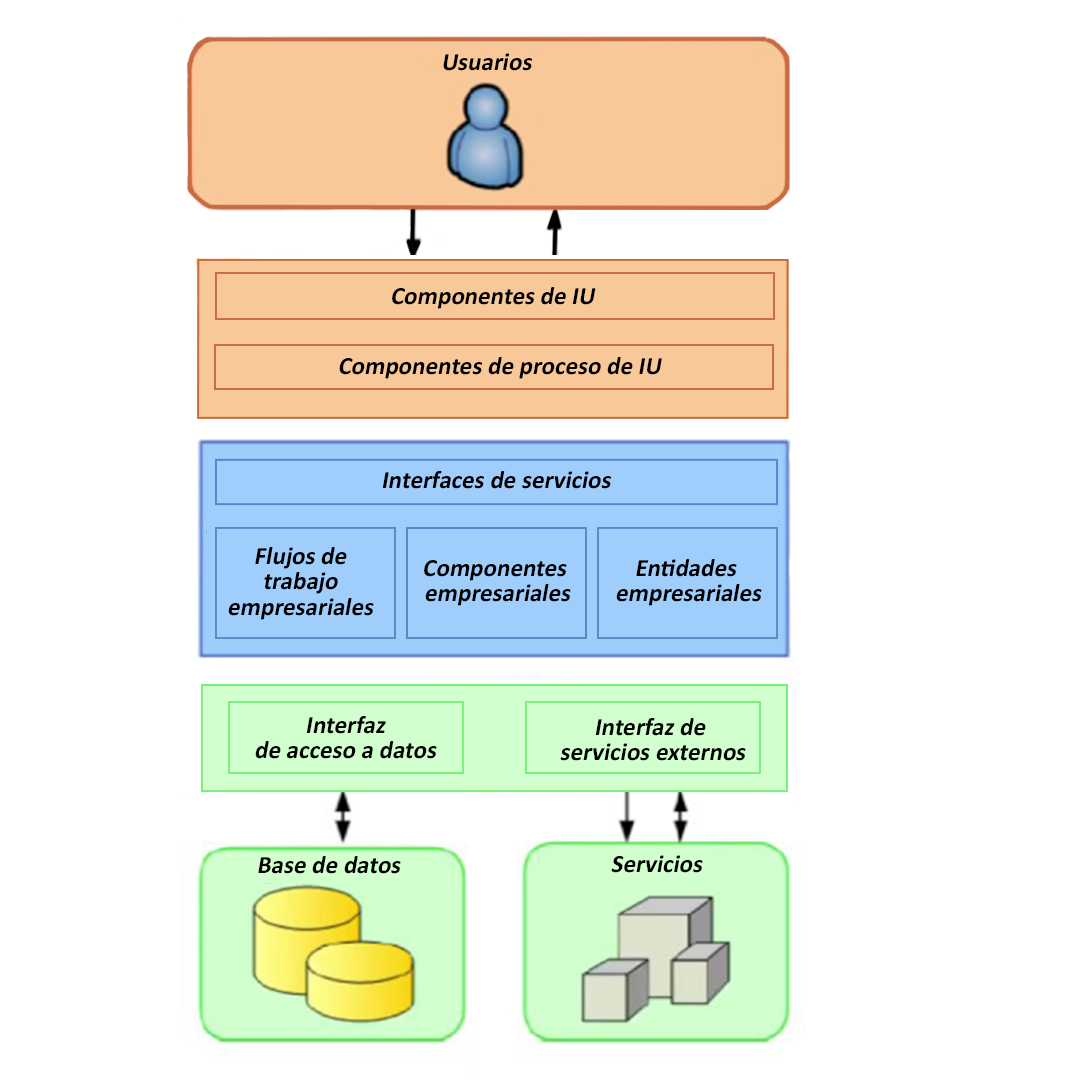
<style>
.page{position:relative;width:1080px;height:1080px;background:#ffffff}
.page>*{position:absolute;margin:0}
.t1{font:25px "Calibri-Bold";color:#000000;font-style:italic}
.t2{font:25px/12.5px "Calibri-Bold";color:#000000;font-style:italic}
</style>
<div class="page">
<p class="t1" style="left:443px;top:53px;width:89px;height:18px">Usuarios</p>
<p class="t1" style="left:392px;top:287px;width:204px;height:22px">Componentes de IU</p>
<p class="t1" style="left:339px;top:357px;width:323px;height:22px">Componentes de proceso de IU</p>
<p class="t1" style="left:382px;top:471px;width:229px;height:18px">Interfaces de servicios</p>
<p class="t2" style="left:228px;top:547px;width:146px;height:73px;text-align:center">Flujos de<br><br> trabajo <br><br>empresariales</p>
<p class="t2" style="left:424px;top:560px;width:147px;height:46px;text-align:center">Componentes <br><br>empresariales</p>
<p class="t2" style="left:616px;top:559px;width:146px;height:47px;text-align:center">Entidades <br><br>empresariales</p>
<p class="t2" style="left:255px;top:716px;width:182px;height:43px;text-align:center">Interfaz<br><br>de acceso a datos</p>
<p class="t2" style="left:560px;top:718px;width:186px;height:43px;text-align:center">Interfaz de <br><br>servicios externos</p>
<p class="t1" style="left:258px;top:856px;width:143px;height:18px">Base de datos</p>
<p class="t1" style="left:611px;top:855px;width:92px;height:18px">Servicios</p>
</div>
